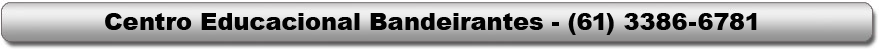
<style>
.page{position:relative;width:879px;height:50px}
.page>*{position:absolute;margin:0}
.t1{font:24px "Arial-Black";color:#010101}
</style>
<div class="page">
<p class="t1" style="left:105px;top:13px;width:652px;height:22px">Centro Educacional Bandeirantes - (61) 3386-6781</p>
</div>
